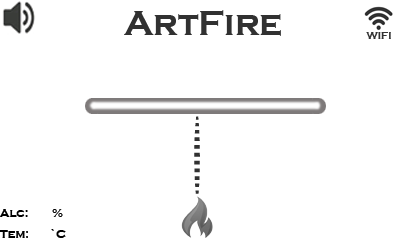
<style>
.page{position:relative;width:400px;height:240px;background:#ffffff}
.page>*{position:absolute;margin:0}
.t1{font:36px "CopperplateGothic-Bold";color:#313131}
.t2{font:10px "CopperplateGothic-Bold";color:#313131}
.t3{font:12.6px "CopperplateGothic-Bold";color:#313131;scale:1.22 1}
.t4{font:12px "CopperplateGothic-Bold";color:#000000}
</style>
<div class="page">
<p class="t1" style="left:124px;top:10px;width:157px;height:26px">ArtFire</p>
<p class="t2" style="left:366px;top:32px;width:25px;height:7px">WIFI</p>
<p class="t3" style="left:194px;top:116px;width:6px;height:78px;rotate:90deg">- - - - - - - - - - -</p>
<p class="t4" style="left:0px;top:209px;width:66px;height:29px">Alc:        %<br>Tem:       `C</p>
</div>
